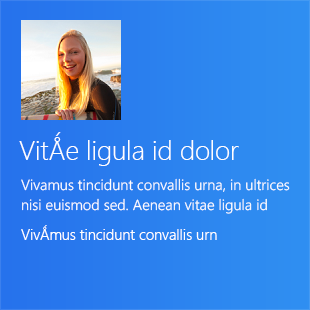
<style>
.page{position:relative;width:310px;height:310px}
.page>*{position:absolute;margin:0}
.t1{font:26.7px "SegoeUI-Light";color:#ffffff}
.t2{font:14.7px/20px "SegoeUI-Semilight";color:#ffffff}
.t3{font:14.7px "SegoeUI-Semilight";color:#ffffff}
</style>
<div class="page">
<p class="t1" style="left:19px;top:132px;width:220px;height:34px">VitǺe ligula id dolor</p>
<p class="t2" style="left:21px;top:178px;width:269px;height:36px">Vivamus tincidunt convallis urna, in ultrices nisi euismod sed. Aenean vitae ligula id</p>
<p class="t3" style="left:21px;top:225px;width:196px;height:15px">VivǺmus tincidunt convallis urn</p>
</div>
